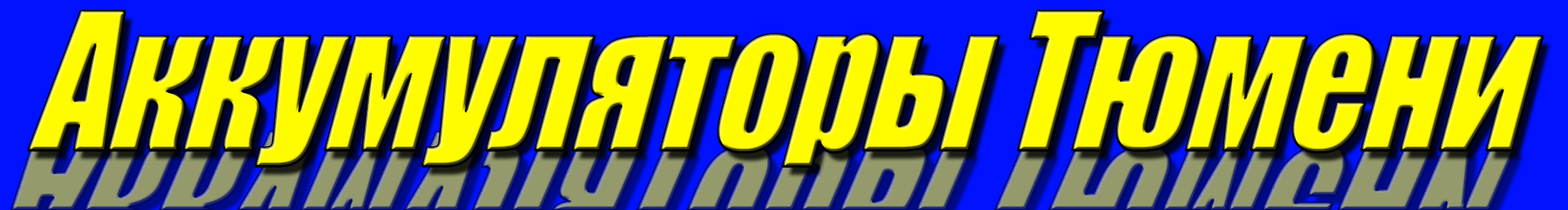
<style>
.page{position:relative;width:1568px;height:210px;background:#fffc00}
.page>*{position:absolute;margin:0}
.t1{font:182px "Impact";color:#fffc00;scale:0.81 1}
</style>
<div class="page">
<p class="t1" style="left:29px;top:11px;width:1514px;height:156px">Аккумуляторы Тюмени</p>
</div>
